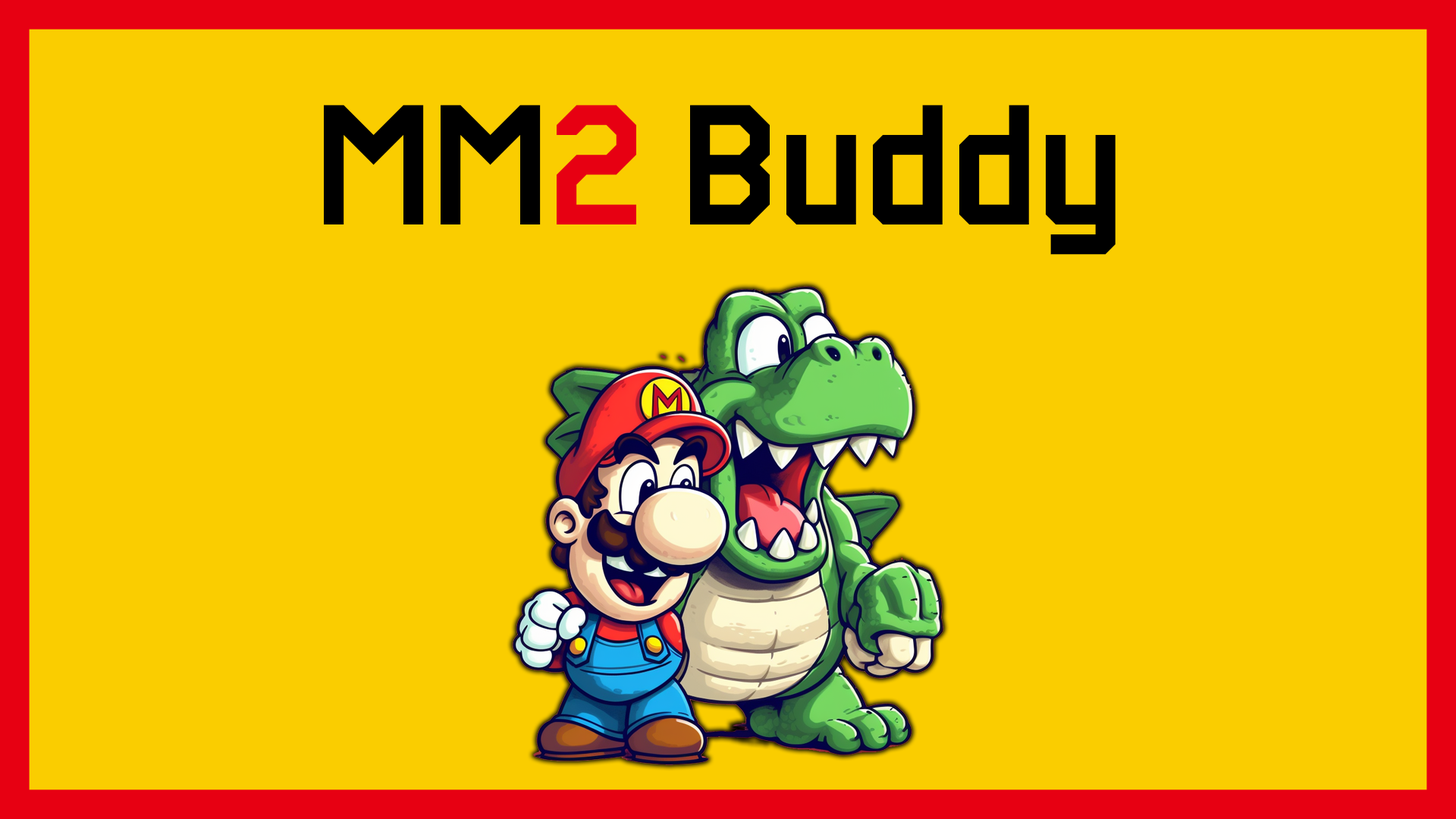
<style>
.page{position:relative;width:1456px;height:819px;background:#facd00}
.page>*{position:absolute;margin:0}
.t1{font:136.5px "SuperMarioMaker2";color:#000000}
.t2{font:136.5px "SuperMarioMaker2";color:#e70012}
</style>
<div class="page">
<p class="t1" style="left:324px;top:105px;width:791px;height:150px">MM<span class="t2">2</span> Buddy</p>
</div>
